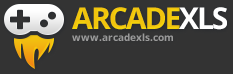
<style>
.page{position:relative;width:233px;height:74px;background:#333333}
.page>*{position:absolute;margin:0}
.t1{font:30px "OpenSans-Bold";letter-spacing:-0.07em;color:#f1c40e}
.t2{font:30px "OpenSans-Bold";letter-spacing:-0.07em;color:#ffffff}
.t3{font:10px "OpenSans-Bold";color:#9a9a9a}
</style>
<div class="page">
<p class="t1" style="left:72px;top:7px;width:108px;height:23px">ARCADE</p>
<p class="t2" style="left:179px;top:7px;width:48px;height:23px">XLS</p>
<p class="t3" style="left:72px;top:33px;width:101px;height:8px">www.arcadexls.com</p>
</div>
